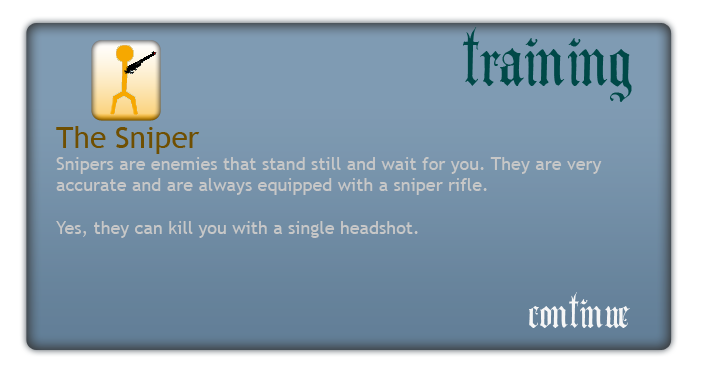
<style>
.page{position:relative;width:707px;height:377px}
.page>*{position:absolute;margin:0}
.t1{font:100px "AngloText";color:#004948}
.t2{font:18px "TrebuchetMS";color:#c7c7c7}
.t3{font:30px "TrebuchetMS";color:#6f4f01}
.t4{font:60px "AngloText";color:#f6f6f6}
</style>
<div class="page">
<p class="t1" style="left:463px;top:27px;width:169px;height:75px">training</p>
<p class="t2" style="left:56px;top:126px;width:546px;height:112px"><span class="t3">The Sniper<br></span>Snipers are enemies that stand still and wait for you. They are very<br>accurate and are always equipped with a sniper rifle.<br><br>Yes, they can kill you with a single headshot.</p>
<p class="t4" style="left:529px;top:292px;width:101px;height:36px">continue</p>
</div>
